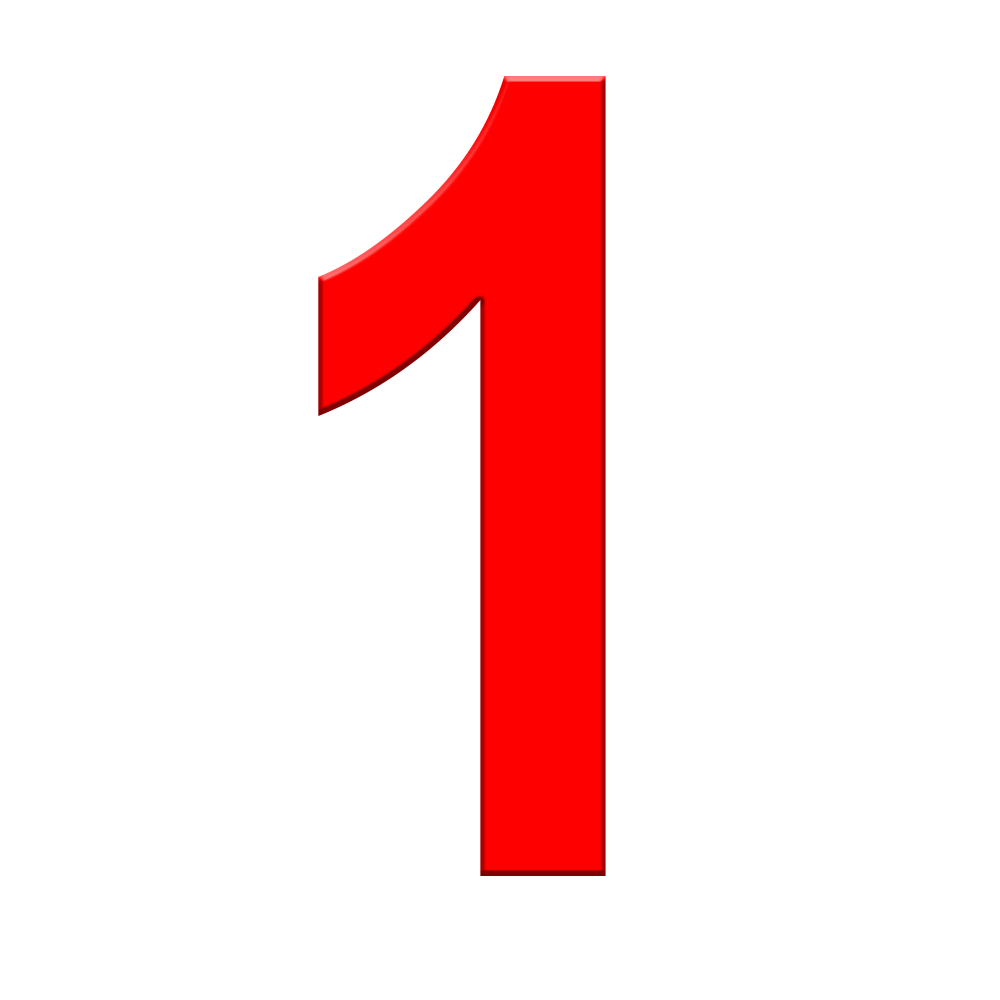
<style>
.page{position:relative;width:1000px;height:1000px;background:#ffffff}
.page>*{position:absolute;margin:0}
.t1{font:1113.9px "ArialNarrow-Bold";color:#ff0000}
</style>
<div class="page">
<p class="t1" style="left:318px;top:76px;width:288px;height:800px">1</p>
</div>
